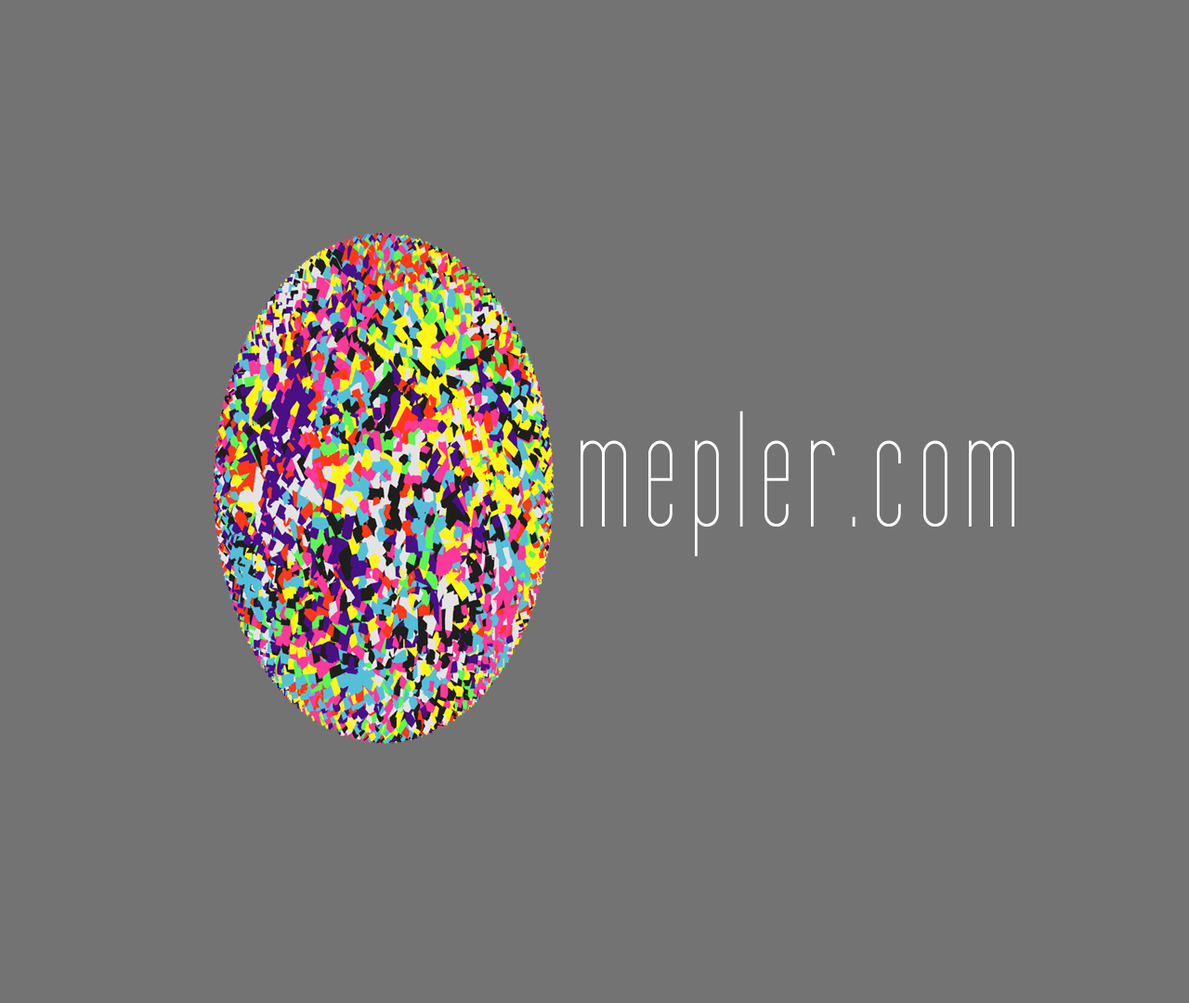
<style>
.page{position:relative;width:1189px;height:1003px;background:#737373}
.page>*{position:absolute;margin:0}
.t1{font:167.2px "TallFilmsExpanded";letter-spacing:0.1em;color:#fffefe;scale:0.67 1}
</style>
<div class="page">
<p class="t1" style="left:580px;top:411px;width:434px;height:145px">mepler.com</p>
</div>
